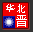
<style>
.page{position:relative;width:33px;height:32px;background:#f20000}
.page>*{position:absolute;margin:0}
.t1{font:10.4px "SimSun";color:#ffffff}
.t2{font:11.7px "SimSun";color:#ffffff}
</style>
<div class="page">
<p class="t1" style="left:6px;top:4px;width:19px;height:9px">华北</p>
<p class="t2" style="left:16px;top:15px;width:11px;height:12px">晋</p>
</div>
